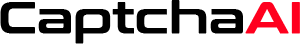
<style>
.page{position:relative;width:300px;height:44px;background:#ffffff}
.page>*{position:absolute;margin:0}
.t1{font:44.4px "ConthraxSb-Regular";color:#000000;font-weight:bold}
.t2{font:44.4px "ConthraxSb-Regular";color:#ff001e;font-weight:bold}
</style>
<div class="page">
<p class="t1" style="left:0px;top:0px;width:300px;height:44px">Captcha<span class="t2">AI</span></p>
</div>
